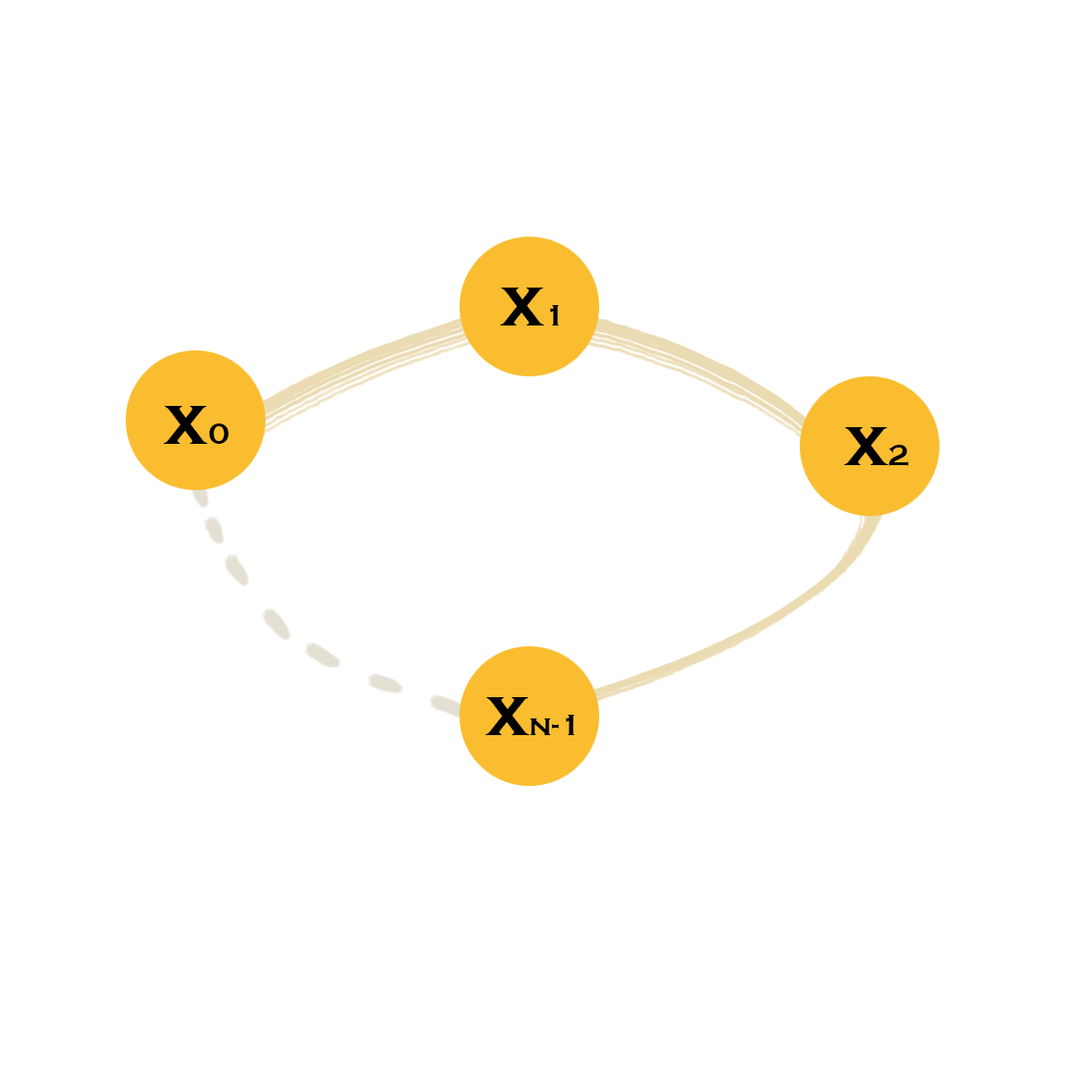
<style>
.page{position:relative;width:1092px;height:1092px;background:#ffffff}
.page>*{position:absolute;margin:0}
.t1{font:69.3px "CopperplateGothic-Bold";color:#000000}
.t2{font:30.8px "CopperplateGothic-Bold";color:#000000}
</style>
<div class="page">
<p class="t1" style="left:500px;top:288px;width:58px;height:37px">x<span class="t2">1</span></p>
<p class="t1" style="left:164px;top:406px;width:65px;height:38px">x<span class="t2">0</span></p>
<p class="t1" style="left:844px;top:427px;width:65px;height:39px">x<span class="t2">2</span></p>
<p class="t2" style="left:485px;top:697px;width:89px;height:38px"><span class="t1">x</span>n-1</p>
</div>
